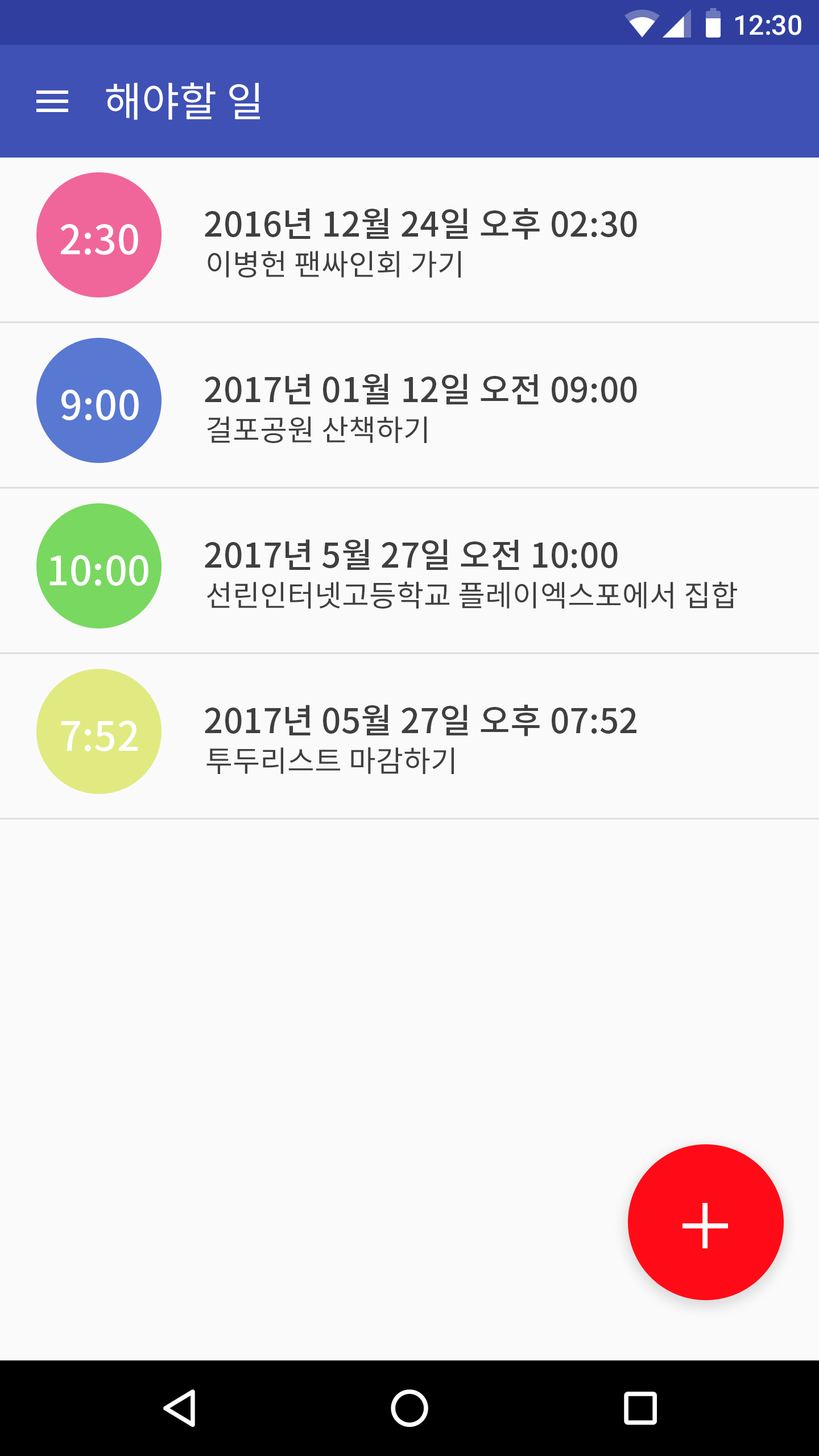
<style>
.page{position:relative;width:819px;height:1456px;background:#fafafa}
.page>*{position:absolute;margin:0}
.t1{font:27.3px "Roboto-Medium";color:#ffffff}
.t2{font:40.9px "NotoSansCJKkr-Regular";color:#ffffff}
.t3{font:34.1px "NotoSansCJKkr-Medium";letter-spacing:0.005em;color:#3f3f3f}
.t4{font:39.8px "NotoSansCJKkr-Medium";letter-spacing:0.005em;color:#ffffff}
.t5{font:29.6px "NotoSansCJKkr-Regular";letter-spacing:0.005em;color:#3f3f3f}
</style>
<div class="page">
<p class="t1" style="left:735px;top:15px;width:66px;height:20px">12:30</p>
<p class="t2" style="left:106px;top:82px;width:154px;height:38px">해야할 일</p>
<p class="t3" style="left:205px;top:208px;width:432px;height:32px">2016년 12월 24일 오후 02:30</p>
<p class="t4" style="left:60px;top:224px;width:78px;height:31px">2:30</p>
<p class="t5" style="left:208px;top:251px;width:253px;height:27px">이병헌 팬싸인회 가기</p>
<p class="t3" style="left:205px;top:374px;width:432px;height:30px">2017년 01월 12일 오전 09:00</p>
<p class="t4" style="left:61px;top:390px;width:78px;height:30px">9:00</p>
<p class="t5" style="left:207px;top:416px;width:220px;height:27px">걸포공원 산책하기</p>
<p class="t3" style="left:205px;top:539px;width:413px;height:31px">2017년 5월 27일 오전 10:00</p>
<p class="t4" style="left:49px;top:555px;width:99px;height:31px">10:00</p>
<p class="t5" style="left:206px;top:581px;width:531px;height:28px">선린인터넷고등학교 플레이엑스포에서 집합</p>
<p class="t3" style="left:205px;top:705px;width:431px;height:32px">2017년 05월 27일 오후 07:52</p>
<p class="t4" style="left:61px;top:721px;width:77px;height:30px">7:52</p>
<p class="t5" style="left:206px;top:747px;width:248px;height:27px">투두리스트 마감하기</p>
</div>
